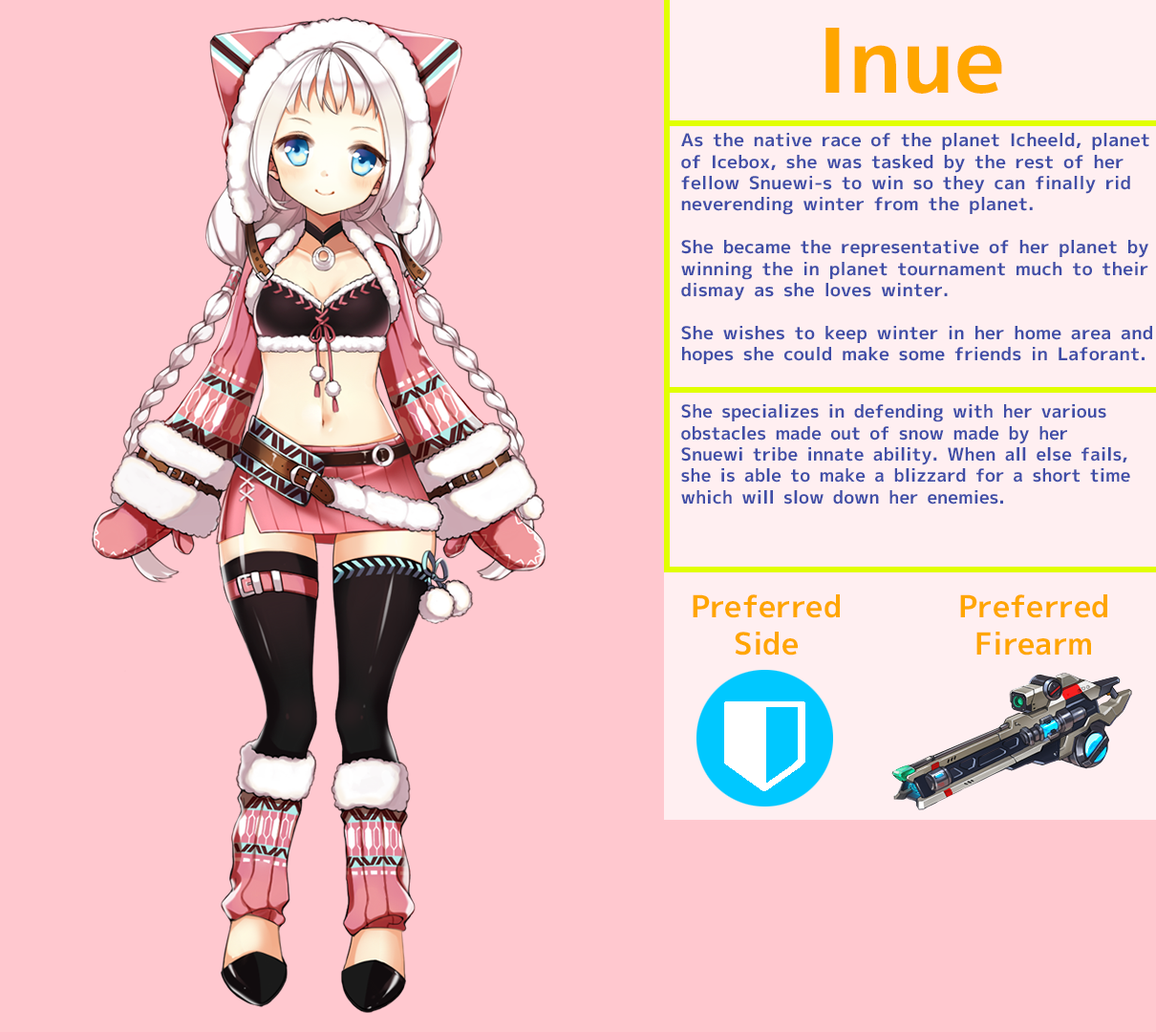
<style>
.page{position:relative;width:1156px;height:1032px;background:#ffc8cf}
.page>*{position:absolute;margin:0}
.t1{font:89.2px "MigMix-2P-Bold";color:#ffa600}
.t2{font:17.8px "MigMix-2P-Bold";color:#404ea7;scale:1.03 1}
.t3{font:17.8px "MigMix-2P-Bold";color:#404ea7}
.t4{font:30.6px "MigMix-2P-Bold";color:#ffa600}
</style>
<div class="page">
<p class="t1" style="left:825px;top:28px;width:177px;height:66px">Inue</p>
<p class="t2" style="left:681px;top:133px;width:471px;height:231px">As the native race of the planet Icheeld, planet of Icebox, she was tasked by the rest of her fellow Snuewi-s to win so they can finally rid neverending winter from the planet.<br><br>She became the representative of her planet by winning the in planet tournament much to their<br>dismay as she loves winter.<br><br>She wishes to keep winter in her home area and hopes she could make some friends in Laforant.</p>
<p class="t3" style="left:681px;top:404px;width:449px;height:100px">She specializes in defending with her various<br>obstacles made out of snow made by her Snuewi tribe innate ability. When all else fails, she is able to make a blizzard for a short time which will slow down her enemies.</p>
<p class="t4" style="left:693px;top:594px;width:147px;height:61px;text-align:center">Preferred<br>Side</p>
<p class="t4" style="left:960px;top:594px;width:147px;height:61px;text-align:center">Preferred<br>Firearm</p>
</div>
